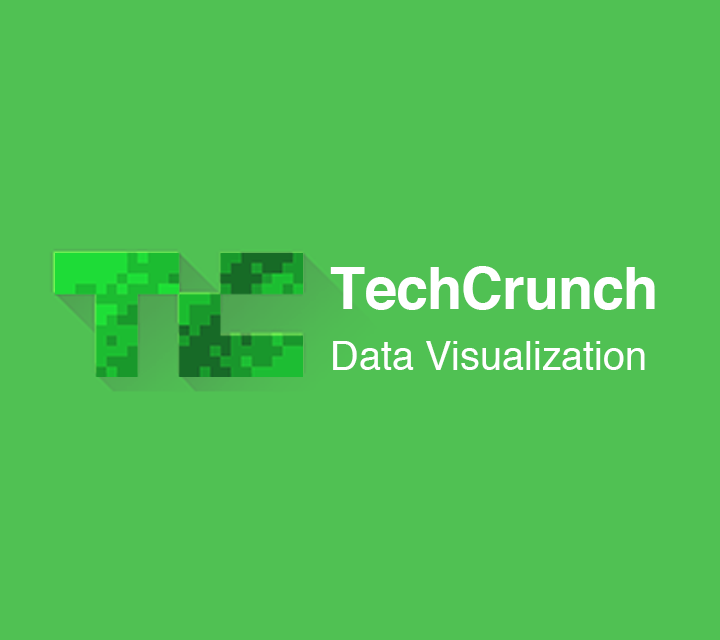
<style>
.page{position:relative;width:720px;height:640px;background:#50c153}
.page>*{position:absolute;margin:0}
.t1{font:39.6px/61.2px "Helvetica";color:#ffffff}
.t2{font:57.6px/61.2px "Helvetica-Bold";letter-spacing:-0.015em;color:#ffffff}
</style>
<div class="page">
<p class="t1" style="left:330px;top:266px;width:325px;height:104px"><span class="t2">TechCrunch <br></span>Data Visualization</p>
</div>
